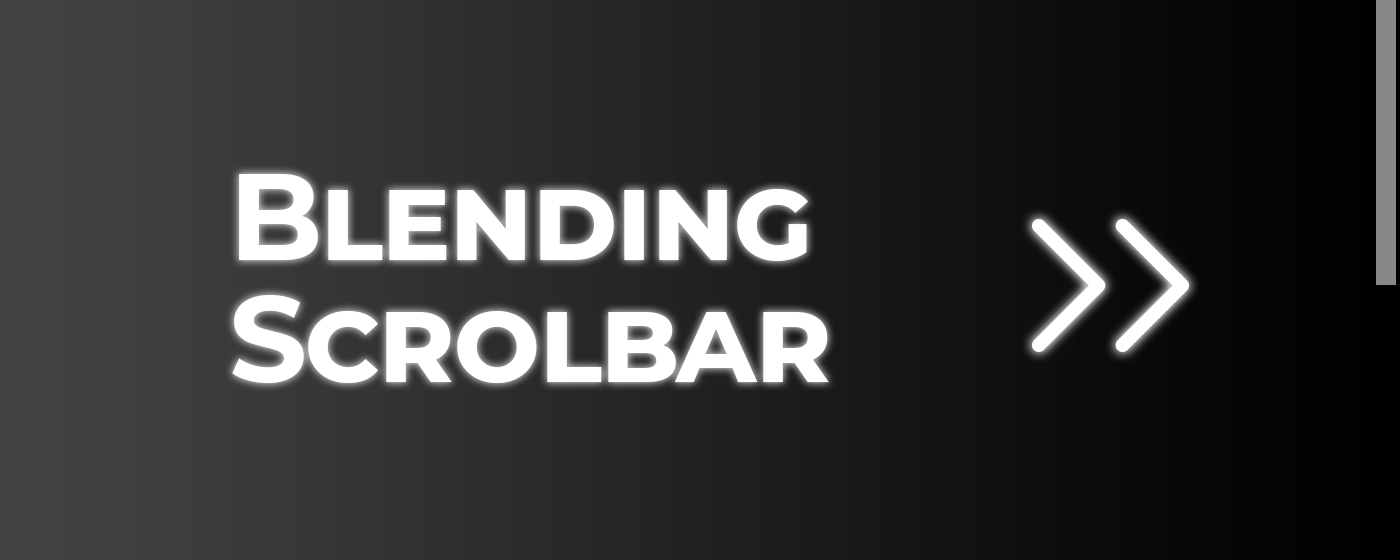
<style>
.page{position:relative;width:1400px;height:560px}
.page>*{position:absolute;margin:0}
.t1{font:122.4px/122.4px "Montserrat-Bold";letter-spacing:-0.025em;color:#ffffff;font-variant:small-caps}
</style>
<div class="page">
<p class="t1" style="left:232px;top:174px;width:597px;height:209px">Blending<br>Scrolbar</p>
</div>
